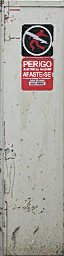
<style>
.page{position:relative;width:64px;height:256px}
.page>*{position:absolute;margin:0}
.t1{font:8px "MHeiPRC-Medium";color:#ffffff;scale:0.92 1}
.t2{font:6.3px "MHeiPRC-Medium";color:#ffffff;text-transform:uppercase;scale:0.8 1}
</style>
<div class="page">
<p class="t1" style="left:23px;top:61px;width:29px;height:6px">PERIGO</p>
<p class="t1" style="left:23px;top:61px;width:29px;height:6px">PERIGO</p>
<p class="t2" style="left:23px;top:72px;width:28px;height:5px">afaste-se</p>
<p class="t2" style="left:23px;top:72px;width:28px;height:5px">afaste-se</p>
</div>
